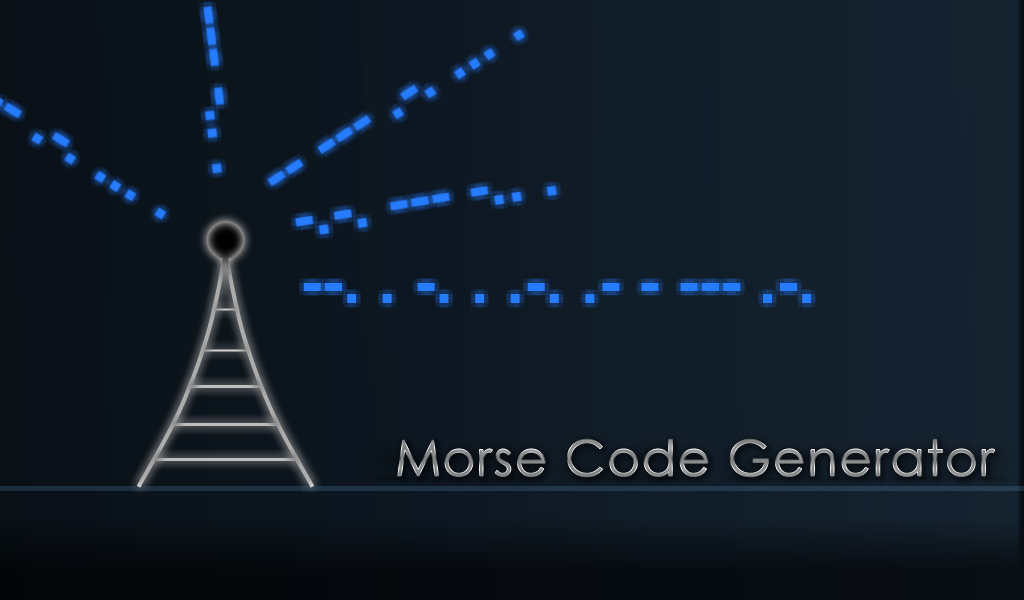
<style>
.page{position:relative;width:1024px;height:600px}
.page>*{position:absolute;margin:0}
.t1{font:50px "CenturyGothic";letter-spacing:0.035em;color:#898a8a}
</style>
<div class="page">
<p class="t1" style="left:397px;top:439px;width:598px;height:38px">Morse Code Generator</p>
</div>
